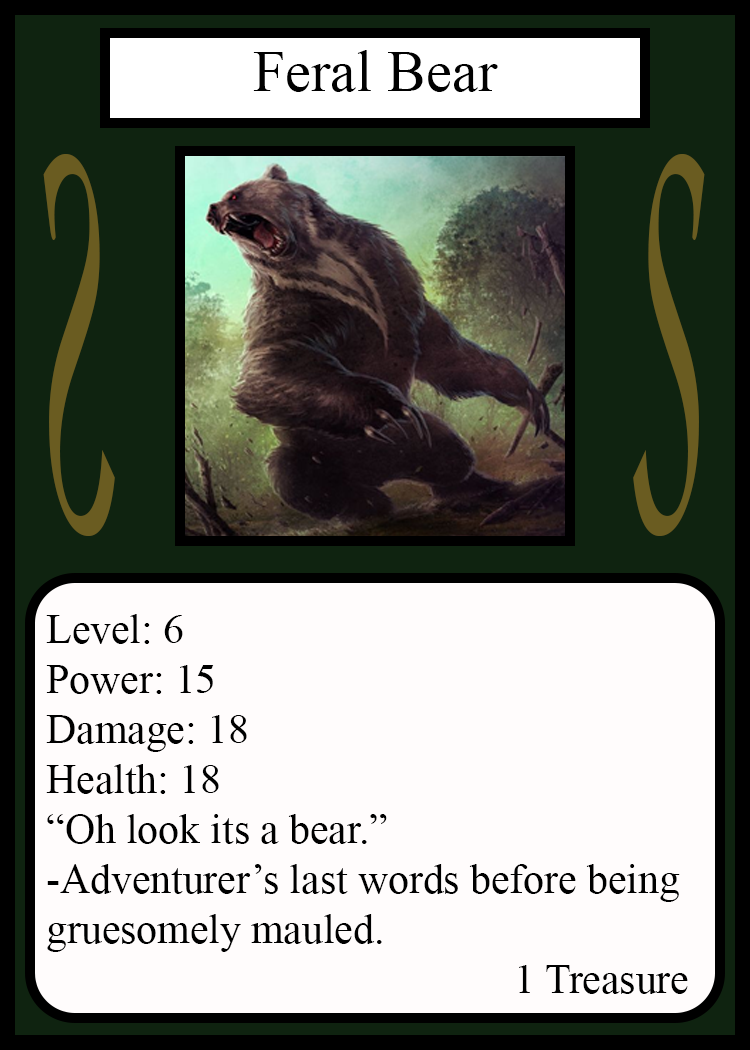
<style>
.page{position:relative;width:750px;height:1050px;background:#fffcfc}
.page>*{position:absolute;margin:0}
.t1{font:58.3px "TimesNewRomanPSMT";color:#010101}
.t2{font:548.5px "Apple-Chancery";color:#6a5c21;scale:0.27 1}
.t3{font:548.2px "Apple-Chancery";color:#6a5c21;scale:0.27 1}
.t4{font:41.7px "TimesNewRomanPSMT";color:#000000}
</style>
<div class="page">
<p class="t1" style="left:253px;top:50px;width:245px;height:42px">Feral Bear</p>
<p class="t2" style="left:43px;top:154px;width:72px;height:382px;rotate:180deg">S</p>
<p class="t3" style="left:633px;top:154px;width:72px;height:382px">S</p>
<p class="t4" style="left:46px;top:614px;width:642px;height:380px">Level: 6<br>Power: 15<br>Damage: 18<br>Health: 18<br>“Oh look its a bear.”<br>-Adventurer’s last words before being <br>gruesomely mauled.<br>             1 Treasure</p>
</div>
